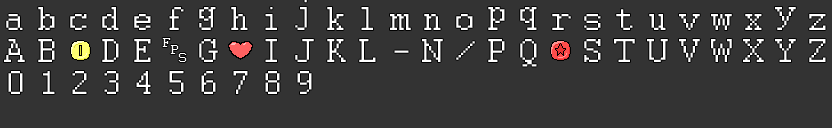
<style>
.page{position:relative;width:832px;height:128px;background:#333333}
.page>*{position:absolute;margin:0}
.t1{font:36.8px "Courier";letter-spacing:0.31em;color:#ffffff}
.t2{font:14.3px/7.9px "Courier";color:#ffffff}
</style>
<div class="page">
<p class="t1" style="left:4px;top:39px;width:822px;height:28px">AB DE G IJKL-N/PQ STUVWXYZ</p>
<p class="t2" style="left:162px;top:38px;width:25px;height:24px">F<br> P<br>  S</p>
<p class="t1" style="left:8px;top:71px;width:304px;height:23px">0123456789</p>
</div>
